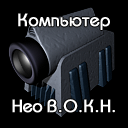
<style>
.page{position:relative;width:128px;height:128px;background:#000000}
.page>*{position:absolute;margin:0}
.t1{font:18px "BauhausC-Medium";color:#ffffff;font-weight:bold}
.t2{font:18px "BauhausC-Medium";letter-spacing:-0.025em;color:#ffffff;font-weight:bold}
</style>
<div class="page">
<p class="t1" style="left:18px;top:13px;width:92px;height:17px">Компьютер</p>
<p class="t1" style="left:12px;top:99px;width:103px;height:14px"><span class="t2">Нео </span>В.О.К.Н.</p>
</div>
